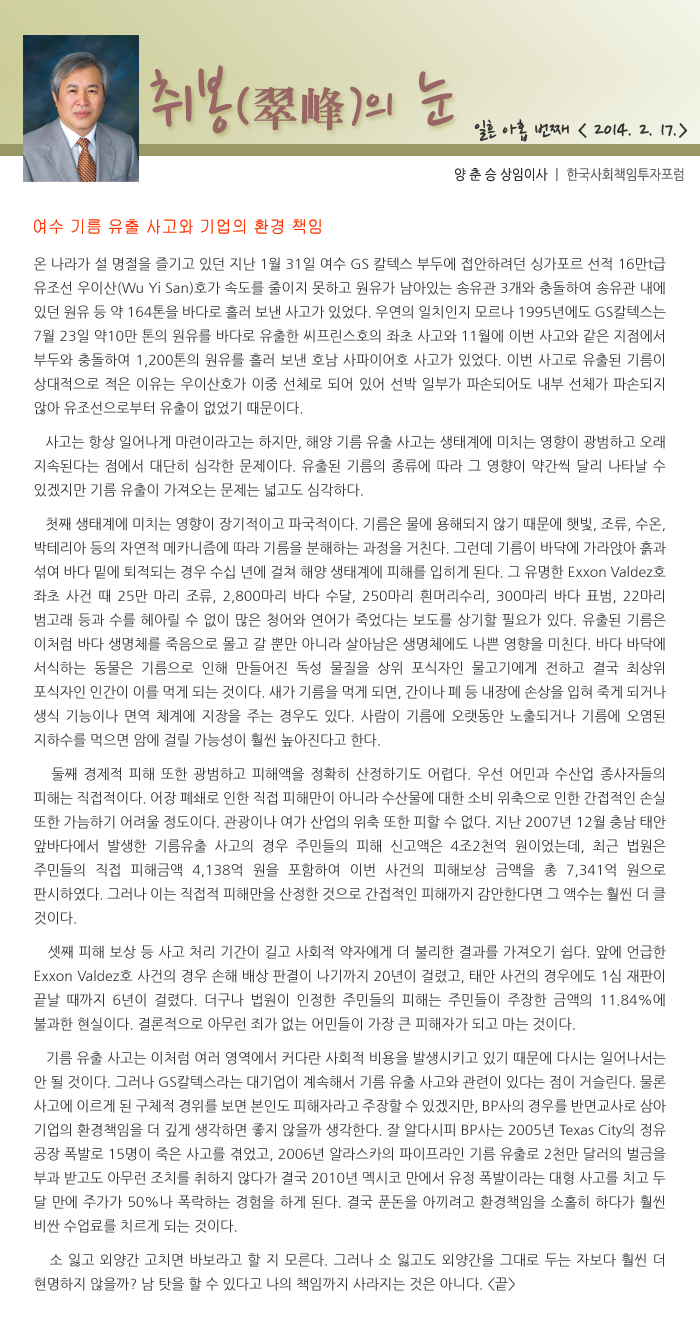
<style>
.page{position:relative;width:700px;height:1332px;background:#ffffff}
.page>*{position:absolute;margin:0}
.t1{font:77.5px "NanumPen";color:#996666}
.t2{font:60px "NanumPen";color:#996666}
.t3{font:48px "H2mjrE";color:#996666}
.t4{font:24px "NanumPen";color:#333333}
.t5{font:14px "NanumGothic";color:#666666;scale:0.9 1}
.t6{font:14px "NanumGothic";color:#333333;scale:0.9 1}
.t7{font:18px "Gulim";color:#ff3300;scale:0.9 1}
.t8{font:14px/24px "NanumGothic";color:#333333}
.t9{font:14px/10px "NanumGothic";color:#333333}
</style>
<div class="page">
<p class="t1" style="left:150px;top:65px;width:304px;height:69px">취봉<span class="t2">(</span><span class="t3">翠峰</span><span class="t2">)</span><span class="t2">의</span> 눈</p>
<p class="t4" style="left:474px;top:119px;width:214px;height:23px">일흔 아홉 번째 &lt; 2014. 2. 17.&gt;</p>
<p class="t5" style="left:455px;top:168px;width:229px;height:14px"><span class="t6">양 춘 승 상임이사 </span>ㅣ 한국사회책임투자포럼</p>
<p class="t7" style="left:34px;top:219px;width:287px;height:15px">여수 기름 유출 사고와 기업의 환경 책임</p>
<p class="t8" style="left:34px;top:257px;width:632px;height:1034px;text-align:justify">온 나라가 설 명절을 즐기고 있던 지난 1월 31일 여수 GS 칼텍스 부두에 접안하려던 싱가포르 선적 16만t급 유조선 우이산(Wu Yi San)호가 속도를 줄이지 못하고 원유가 남아있는 송유관 3개와 충돌하여 송유관 내에 있던 원유 등 약 164톤을 바다로 흘러 보낸 사고가 있었다. 우연의 일치인지 모르나 1995년에도 GS칼텍스는 7월 23일 약10만 톤의 원유를 바다로 유출한 씨프린스호의 좌초 사고와 11월에 이번 사고와 같은 지점에서 부두와 충돌하여 1,200톤의 원유를 흘러 보낸 호남 사파이어호 사고가 있었다. 이번 사고로 유출된 기름이 상대적으로 적은 이유는 우이산호가 이중 선체로 되어 있어 선박 일부가 파손되어도 내부 선체가 파손되지 않아 유조선으로부터 유출이<span class="t9"> 없었기 때문이다.<br><br>   사고는 항상 일어나게 마련이라</span>고는 하지만, 해양 기름 유출 사고는 생태계에 미치는 영향이 광범하고 오래 지속된다는 점에서 대단히 심각한 문제이다. 유출된 기름의 종류에 따라 그 영향이 약간씩 달리 나타날 수 있겠지만 기름 유출이 가져오는 문제는 <span class="t9">넓고도 심각하다.<br><br>   첫째 생태계에 미치는 영향이 장기적이고 파국적</span>이다. 기름은 물에 용해되지 않기 때문에 햇빛, 조류, 수온, 박테리아 등의 자연적 메카니즘에 따라 기름을 분해하는 과정을 거친다. 그런데 기름이 바닥에 가라앉아 흙과 섞여 바다 밑에 퇴적되는 경우 수십 년에 걸쳐 해양 생태계에 피해를 입히게 된다. 그 유명한 Exxon Valdez호 좌초 사건 때 25만 마리 조류, 2,800마리 바다 수달, 250마리 흰머리수리, 300마리 바다 표범, 22마리 범고래 등과 수를 헤아릴 수 없이 많은 청어와 연어가 죽었다는 보도를 상기할 필요가 있다. 유출된 기름은 이처럼 바다 생명체를 죽음으로 몰고 갈 뿐만 아니라 살아남은 생명체에도 나쁜 영향을 미친다. 바다 바닥에 서식하는 동물은 기름으로 인해 만들어진 독성 물질을 상위 포식자인 물고기에게 전하고 결국 최상위 포식자인 인간이 이를 먹게 되는 것이다. 새가 기름을 먹게 되면, 간이나 폐 등 내장에 손상을 입혀 죽게 되거나 생식 기능이나 면역 체계에 지장을 주는 경우도 있다. 사람이 기름에 오랫동안 노출되거나 기름에 오염된 지하수를 먹으면 암에 걸릴 가<span class="t9">능성이 훨씬 높아진다고 한다.<br><br>   둘째 경제적 피해 또한 광범</span>하고 피해액을 정확히 산정하기도 어렵다. 우선 어민과 수산업 종사자들의 피해는 직접적이다. 어장 폐쇄로 인한 직접 피해만이 아니라 수산물에 대한 소비 위축으로 인한 간접적인 손실 또한 가늠하기 어려울 정도이다. 관광이나 여가 산업의 위축 또한 피할 수 없다. 지난 2007년 12월 충남 태안 앞바다에서 발생한 기름유출 사고의 경우 주민들의 피해 신고액은 4조2천억 원이었는데, 최근 법원은 주민들의 직접 피해금액 4,138억 원을 포함하여 이번 사건의 피해보상 금액을 총 7,341억 원으로 판시하였다. 그러나 이는 직접적 피해만을 산정한 것으로 간접적인 피해까지 감안한다면 그 액수는 훨씬 더 클 것<span class="t9">이다.  <br><br>   셋째 피해 </span>보상 등 사고 처리 기간이 길고 사회적 약자에게 더 불리한 결과를 가져오기 쉽다. 앞에 언급한 Exxon Valdez호 사건의 경우 손해 배상 판결이 나기까지 20년이 걸렸고, 태안 사건의 경우에도 1심 재판이 끝날 때까지 6년이 걸렸다. 더구나 법원이 인정한 주민들의 피해는 주민들이 주장한 금액의 11.84%에 불과한 현실이다. 결론적으로 아무런 죄가<span class="t9"> 없는 어민들이 가장 큰 피해자가 되고 마는 것이다.<br><br>   기름 유출 사고는 이처럼 여러 영역에서 커다</span>란 사회적 비용을 발생시키고 있기 때문에 다시는 일어나서는 안 될 것이다. 그러나 GS칼텍스라는 대기업이 계속해서 기름 유출 사고와 관련이 있다는 점이 거슬린다. 물론 사고에 이르게 된 구체적 경위를 보면 본인도 피해자라고 주장할 수 있겠지만, BP사의 경우를 반면교사로 삼아 기업의 환경책임을 더 깊게 생각하면 좋지 않을까 생각한다. 잘 알다시피 BP사는 2005년 Texas City의 정유 공장 폭발로 15명이 죽은 사고를 겪었고, 2006년 알라스카의 파이프라인 기름 유출로 2천만 달러의 벌금을 부과 받고도 아무런 조치를 취하지 않다가 결국 2010년 멕시코 만에서 유정 폭발이라는 대형 사고를 치고 두 달 만에 주가가 50%나 폭락하는 경험을 하게 된다. 결국 푼돈을 아끼려고 환경책임을 소홀히 하다가 훨씬 비싼 수업료를 <span class="t9">치르게 되는 것이다.<br><br>   소 잃고 외양간 고치</span>면 바보라고 할 지 모른다. 그러나 소 잃고도 외양간을 그대로 두는 자보다 훨씬 더 현명하지 않을까? 남 탓을 할 수 있다고 나의 책임까지 사라지는 것은 아니다. &lt;끝&gt;</p>
</div>
